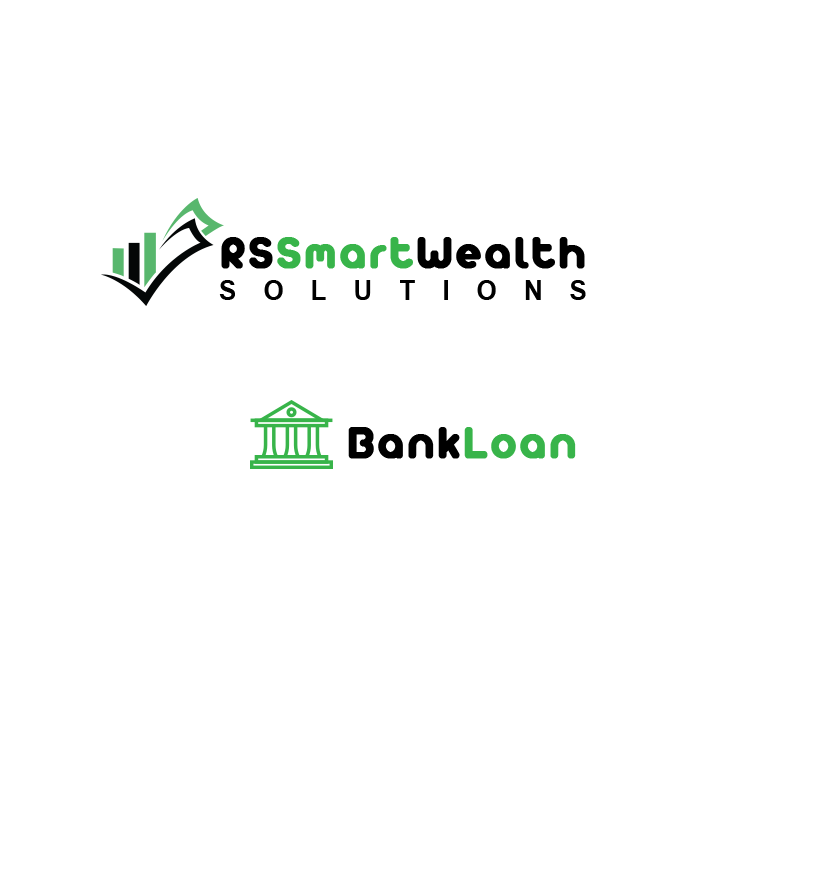
<style>
.page{position:relative;width:826px;height:869px;background:#ffffff}
.page>*{position:absolute;margin:0}
.t1{font:49px "Arista2.0Alternate";letter-spacing:0.05em;color:#000000;font-weight:bold}
.t2{font:49px "Arista2.0Alternate";letter-spacing:0.05em;color:#38b44a;font-weight:bold}
.t3{font:26.5px "Arial-BoldMT";letter-spacing:1.04em;color:#000000;text-transform:uppercase}
</style>
<div class="page">
<p class="t1" style="left:221px;top:237px;width:364px;height:32px">RS<span class="t2">Smart</span>Wealth</p>
<p class="t3" style="left:219px;top:280px;width:367px;height:20px">Solutions</p>
</div>
